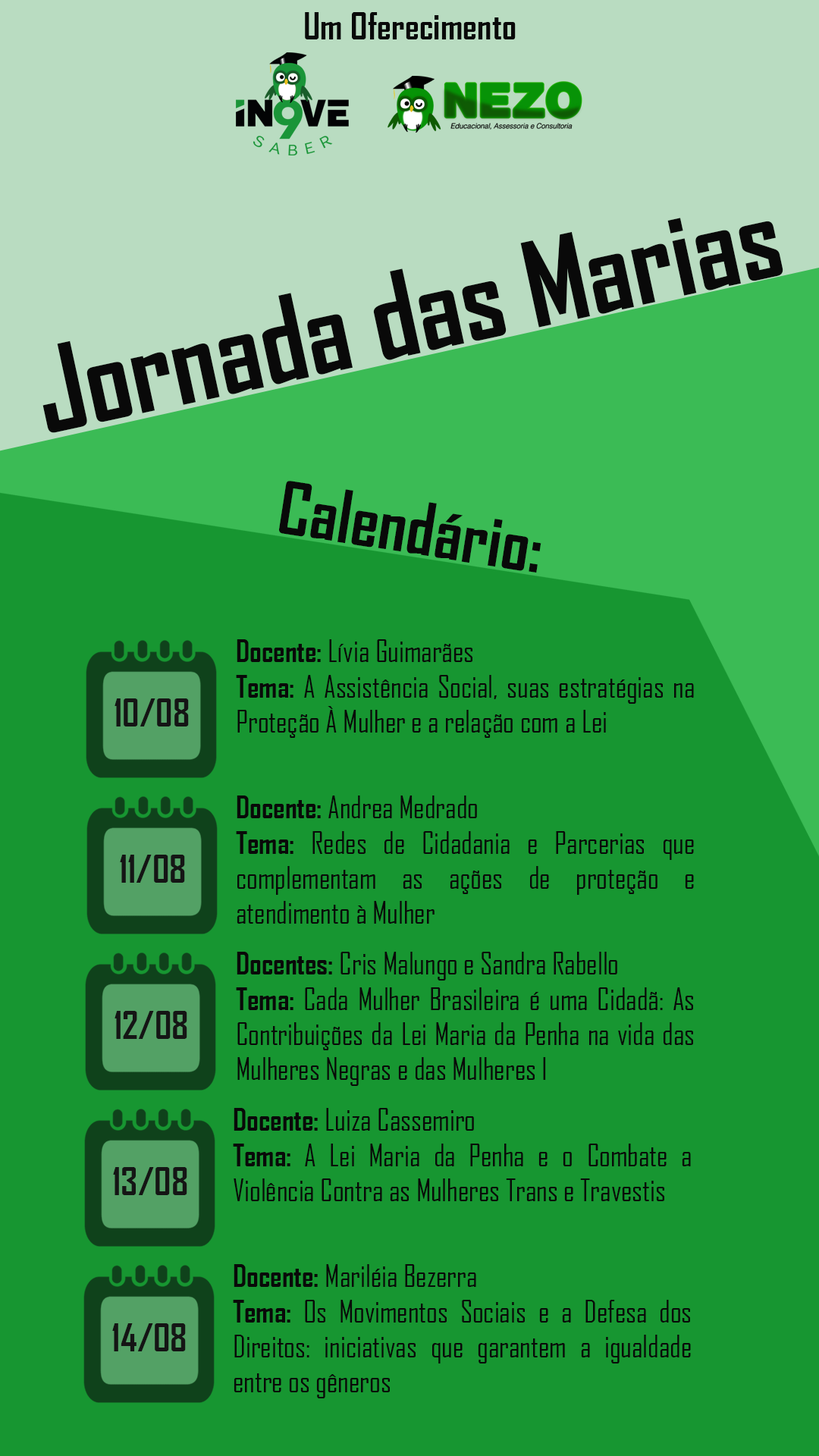
<style>
.page{position:relative;width:819px;height:1456px;background:#179631}
.page>*{position:absolute;margin:0}
.t1{font:36px "AgencyFB-Bold";color:#090909}
.t2{font:112.7px "AgencyFB-Bold";color:#090909}
.t3{font:69.5px "AgencyFB-Bold";color:#090909}
.t4{font:29.3px "AgencyFB-Reg";color:#090909}
.t5{font:29.3px "AgencyFB-Bold";color:#090909}
.t6{font:36.6px "AgencyFB-Bold";color:#151515}
</style>
<div class="page">
<p class="t1" style="left:305px;top:12px;width:211px;height:27px">Um Oferecimento</p>
<p class="t2" style="left:42px;top:218px;width:741px;height:215px;rotate:-12deg">Jornada das Marias</p>
<p class="t3" style="left:279px;top:481px;width:262px;height:92px;rotate:9deg">Calendário:</p>
<p class="t4" style="left:236px;top:639px;width:458px;height:99px;text-align:justify"><span class="t5">Docente: </span>Lívia Guimarães<br><span class="t5">Tema: </span>A Assistência Social, suas estratégias na Proteção À Mulher e a relação com a Lei</p>
<p class="t6" style="left:115px;top:698px;width:74px;height:28px">10/08</p>
<p class="t4" style="left:236px;top:795px;width:458px;height:129px;text-align:justify"><span class="t5">Docente: </span>Andrea Medrado<br><span class="t5">Tema:</span> Redes de Cidadania e Parcerias que complementam as ações de proteção e atendimento à Mulher</p>
<p class="t6" style="left:120px;top:855px;width:65px;height:28px">11/08</p>
<p class="t4" style="left:236px;top:952px;width:457px;height:134px;text-align:justify"><span class="t5">Docentes: </span>Cris Malungo e Sandra Rabello<br><span class="t5">Tema:</span> Cada Mulher Brasileira é uma Cidadã: As Contribuições da Lei Maria da Penha na vida das Mulheres Negras e das Mulheres I</p>
<p class="t6" style="left:115px;top:1011px;width:72px;height:28px">12/08</p>
<p class="t4" style="left:233px;top:1108px;width:458px;height:93px;text-align:justify"><span class="t5">Docente: </span>Luiza Cassemiro<br><span class="t5">Tema:</span> A Lei Maria da Penha e o Combate a Violência Contra as Mulheres Trans e Travestis</p>
<p class="t6" style="left:113px;top:1167px;width:74px;height:28px">13/08</p>
<p class="t4" style="left:233px;top:1264px;width:458px;height:134px;text-align:justify"><span class="t5">Docente: </span>Mariléia Bezerra<br><span class="t5">Tema:</span> Os Movimentos Sociais e a Defesa dos Direitos: iniciativas que garantem a igualdade entre os gêneros</p>
<p class="t6" style="left:112px;top:1323px;width:74px;height:28px">14/08</p>
</div>
